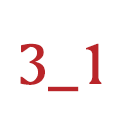
<style>
.page{position:relative;width:128px;height:128px;background:#ffffff}
.page>*{position:absolute;margin:0}
.t1{font:60px "Weibei-TC-Bold";color:#ba2529}
</style>
<div class="page">
<p class="t1" style="left:20px;top:43px;width:82px;height:49px">3_1</p>
</div>
